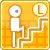
<style>
.page{position:relative;width:50px;height:50px}
.page>*{position:absolute;margin:0}
.t1{font:13.4px "AmiraParadiso";color:#fa830c}
</style>
<div class="page">
<p class="t1" style="left:37px;top:5px;width:7px;height:9px">L</p>
</div>
